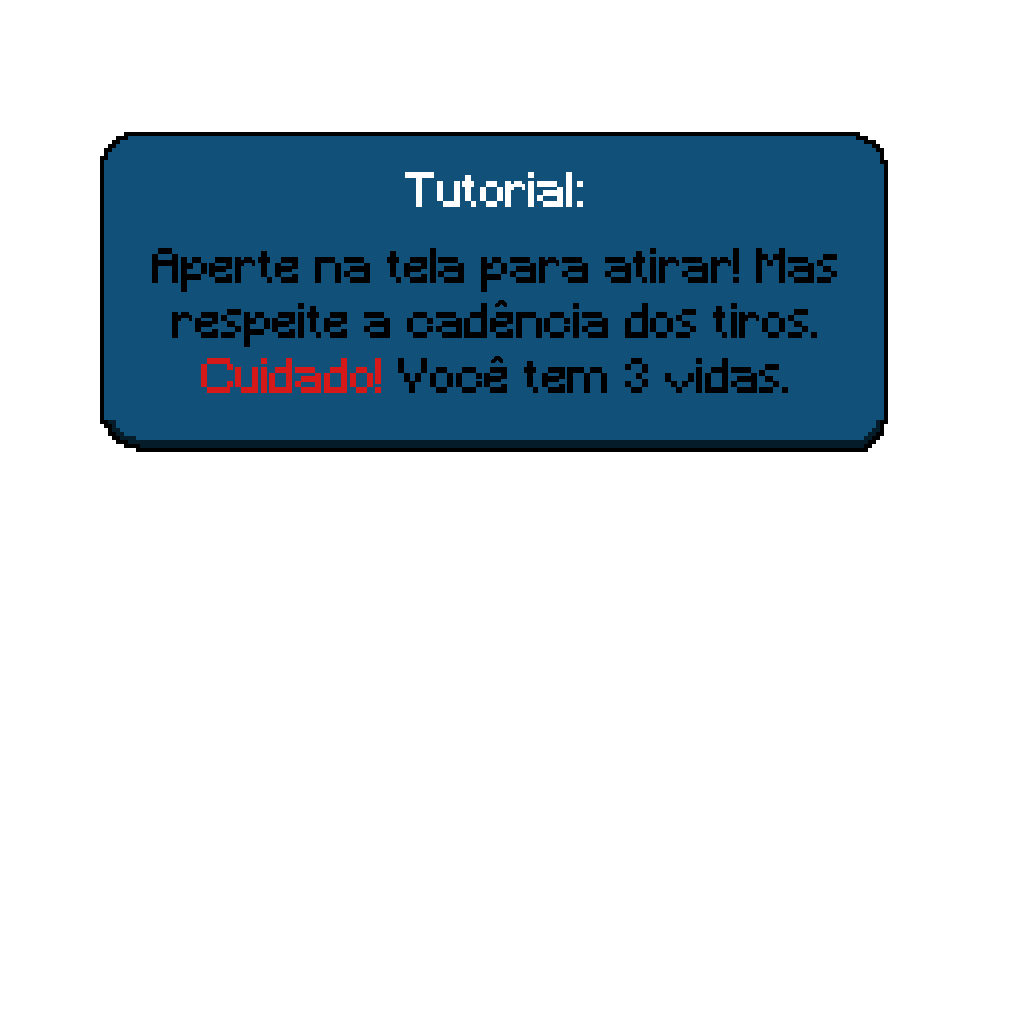
<style>
.page{position:relative;width:1024px;height:1024px;background:#ffffff}
.page>*{position:absolute;margin:0}
.t1{font:45.8px "Minecraft";color:#ffffff}
.t2{font:45.8px "Minecraft";color:#000000}
.t3{font:45.8px "Minecraft";color:#d51818}
</style>
<div class="page">
<p class="t1" style="left:405px;top:172px;width:178px;height:35px">Tutorial:</p>
<p class="t2" style="left:152px;top:248px;width:685px;height:145px;text-align:center">Aperte na tela para atirar! Mas respeite a cadencia dos tiros. <span class="t3">Cuidado!</span> Voce tem 3 vidas.</p>
</div>
